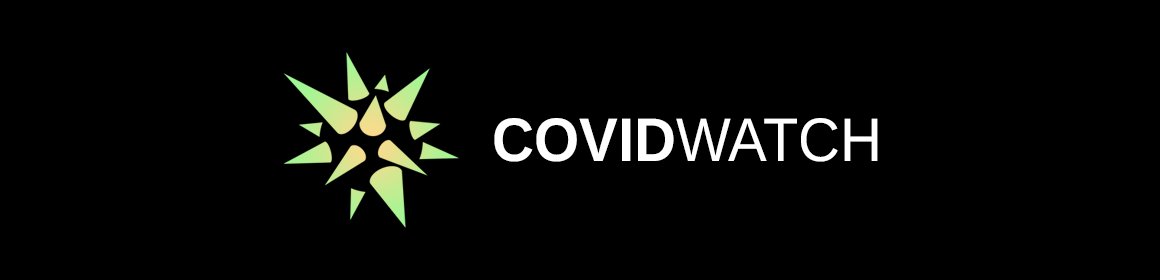
<style>
.page{position:relative;width:1160px;height:280px;background:#000000}
.page>*{position:absolute;margin:0}
.t1{font:61.5px "Arimo-Bold";color:#ffffff;scale:0.94 1}
.t2{font:61.5px "Arimo-Regular";color:#ffffff;scale:0.94 1}
</style>
<div class="page">
<p class="t1" style="left:494px;top:118px;width:384px;height:44px">COVID<span class="t2">WATCH</span></p>
</div>
